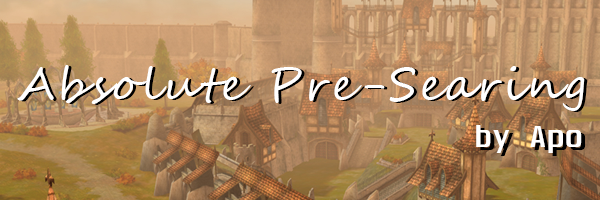
<style>
.page{position:relative;width:600px;height:200px}
.page>*{position:absolute;margin:0}
.t1{font:45px "SegoeScript";letter-spacing:0.06em;color:#ffffff}
.t2{font:45px "SegoeScript";letter-spacing:0.06em}
.t3{font:27px "Unispace-Bold";letter-spacing:0.06em;color:#ffffff}
.t4{font:27px "Unispace-Bold";letter-spacing:0.06em;color:#000000}
</style>
<div class="page">
<p class="t1" style="left:17px;top:65px;width:568px;height:46px">Absolute Pre-Searing</p>
<p class="t2" style="left:20px;top:66px;width:568px;height:46px">Absolute Pre-Searing</p>
<p class="t3" style="left:476px;top:125px;width:106px;height:28px">by Apo</p>
<p class="t4" style="left:480px;top:128px;width:106px;height:28px">by Apo</p>
</div>
